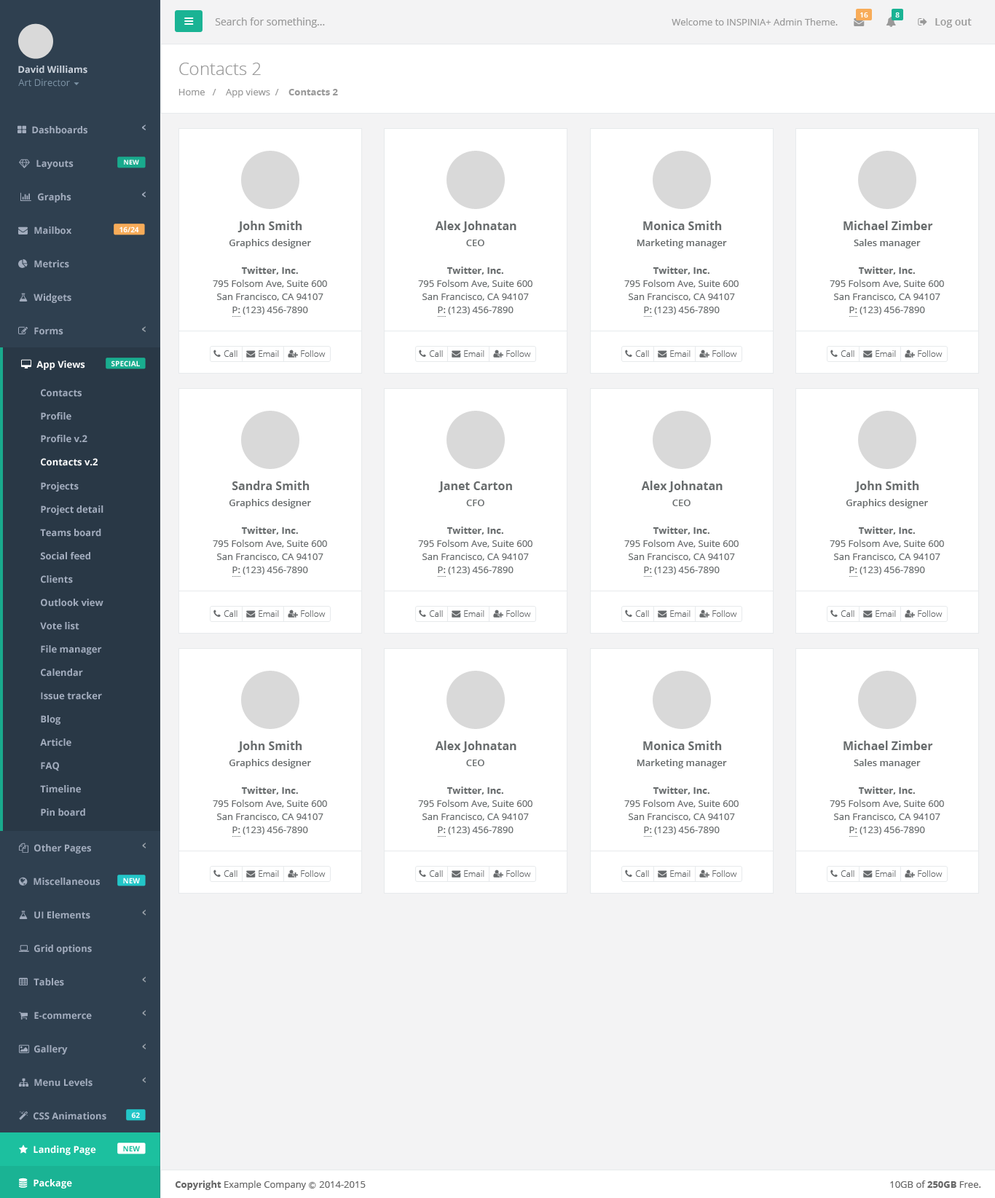
<style>
.page{position:relative;width:995px;height:1198px;background:#ffffff}
.page>*{position:absolute;margin:0}
.t1{font:10.2px "OpenSans";color:#999999}
.t2{font:7.3px "OpenSans-Semibold";color:#ffffff}
.t3{font:9.5px "OpenSans";color:#999999}
.t4{font:10.2px "OpenSans-Semibold";color:#999999}
.t5{font:9.5px "OpenSans-Bold";color:#cad1db}
.t6{font:17.5px "OpenSans-Light";color:#999999}
.t7{font:9.5px "OpenSans";color:#7d93a5}
.t8{font:9.5px "OpenSans-Bold";color:#999999}
.t9{font:9.5px "OpenSans-Bold";color:#a2acbd}
.t10{font:6.6px "OpenSans-Bold";color:#fefefe}
.t11{font:11.7px "OpenSans-Bold";color:#686c6d}
.t12{font:7.3px "OpenSans-Bold";color:#fefefe}
.t13{font:9.5px "OpenSans-Semibold";color:#686c6d}
.t14{font:9.5px/13.1px "OpenSans";color:#686c6d}
.t15{font:9.5px/13.1px "OpenSans-Bold";color:#686c6d}
.t16{font:5.8px "OpenSans";color:#686c6d}
.t17{font:8.7px "OpenSans-Light";color:#676a6c}
.t18{font:9.5px "OpenSans-Bold";color:#ffffff}
.t19{font:7.3px "OpenSans-Bold";color:#1cc09f}
.t20{font:9.5px "OpenSans";color:#666666}
.t21{font:9.5px "OpenSans-Bold";color:#666666}
.t22{font:7.3px "Meiryo";color:#666666}
</style>
<div class="page">
<p class="t1" style="left:215px;top:17px;width:110px;height:11px">Search for something...</p>
<p class="t2" style="left:860px;top:12px;width:8px;height:5px">16</p>
<p class="t2" style="left:895px;top:12px;width:5px;height:5px">8</p>
<p class="t3" style="left:672px;top:18px;width:166px;height:7px">Welcome to INSPINIA+ Admin Theme.</p>
<p class="t4" style="left:935px;top:18px;width:37px;height:10px">Log out</p>
<p class="t5" style="left:18px;top:66px;width:69px;height:8px">David Williams</p>
<p class="t6" style="left:179px;top:63px;width:82px;height:12px">Contacts 2</p>
<p class="t7" style="left:18px;top:79px;width:52px;height:8px">Art Director</p>
<p class="t3" style="left:178px;top:89px;width:160px;height:9px">Home   /    App views  /   <span class="t8"> Contacts 2</span></p>
<p class="t9" style="left:32px;top:126px;width:55px;height:8px">Dashboards</p>
<p class="t9" style="left:36px;top:160px;width:38px;height:9px">Layouts</p>
<p class="t10" style="left:124px;top:160px;width:15px;height:5px">NEW</p>
<p class="t9" style="left:38px;top:193px;width:33px;height:10px">Graphs</p>
<p class="t11" style="left:237px;top:221px;width:65px;height:11px">John Smith</p>
<p class="t11" style="left:435px;top:221px;width:81px;height:11px">Alex Johnatan</p>
<p class="t11" style="left:643px;top:221px;width:79px;height:9px">Monica Smith</p>
<p class="t11" style="left:844px;top:221px;width:89px;height:9px">Michael Zimber</p>
<p class="t9" style="left:34px;top:227px;width:37px;height:8px">Mailbox</p>
<p class="t12" style="left:119px;top:227px;width:20px;height:5px">16/24</p>
<p class="t13" style="left:229px;top:239px;width:82px;height:9px">Graphics designer</p>
<p class="t13" style="left:466px;top:240px;width:18px;height:6px">CEO</p>
<p class="t13" style="left:637px;top:239px;width:90px;height:9px">Marketing manager</p>
<p class="t13" style="left:854px;top:239px;width:67px;height:9px">Sales manager</p>
<p class="t9" style="left:34px;top:260px;width:35px;height:8px">Metrics</p>
<p class="t14" style="left:213px;top:267px;width:114px;height:48px;text-align:center"><span class="t15">Twitter, Inc.<br></span>795 Folsom Ave, Suite 600<br>San Francisco, CA 94107<br>P: (123) 456-7890</p>
<p class="t14" style="left:418px;top:267px;width:115px;height:48px;text-align:center"><span class="t15">Twitter, Inc.<br></span>795 Folsom Ave, Suite 600<br>San Francisco, CA 94107<br>P: (123) 456-7890</p>
<p class="t14" style="left:624px;top:267px;width:115px;height:48px;text-align:center"><span class="t15">Twitter, Inc.<br></span>795 Folsom Ave, Suite 600<br>San Francisco, CA 94107<br>P: (123) 456-7890</p>
<p class="t14" style="left:830px;top:267px;width:114px;height:48px;text-align:center"><span class="t15">Twitter, Inc.<br></span>795 Folsom Ave, Suite 600<br>San Francisco, CA 94107<br>P: (123) 456-7890</p>
<p class="t9" style="left:34px;top:294px;width:37px;height:9px">Widgets</p>
<p class="t16" style="left:232px;top:316px;width:8px;height:1px">......</p>
<p class="t16" style="left:438px;top:316px;width:8px;height:1px">......</p>
<p class="t16" style="left:644px;top:316px;width:8px;height:1px">......</p>
<p class="t16" style="left:849px;top:316px;width:8px;height:1px">......</p>
<p class="t9" style="left:34px;top:327px;width:29px;height:8px">Forms</p>
<p class="t17" style="left:224px;top:350px;width:13px;height:7px">Call</p>
<p class="t17" style="left:259px;top:350px;width:20px;height:7px">Email</p>
<p class="t17" style="left:301px;top:350px;width:25px;height:7px">Follow</p>
<p class="t17" style="left:429px;top:350px;width:14px;height:7px">Call</p>
<p class="t17" style="left:464px;top:350px;width:20px;height:7px">Email</p>
<p class="t17" style="left:506px;top:350px;width:25px;height:7px">Follow</p>
<p class="t17" style="left:635px;top:350px;width:14px;height:7px">Call</p>
<p class="t17" style="left:670px;top:350px;width:21px;height:7px">Email</p>
<p class="t17" style="left:712px;top:350px;width:25px;height:7px">Follow</p>
<p class="t17" style="left:841px;top:350px;width:13px;height:7px">Call</p>
<p class="t17" style="left:876px;top:350px;width:20px;height:7px">Email</p>
<p class="t17" style="left:918px;top:350px;width:25px;height:7px">Follow</p>
<p class="t18" style="left:36px;top:361px;width:49px;height:9px">App Views</p>
<p class="t12" style="left:111px;top:361px;width:29px;height:5px">SPECIAL</p>
<p class="t9" style="left:41px;top:389px;width:41px;height:8px">Contacts</p>
<p class="t9" style="left:41px;top:412px;width:30px;height:8px">Profile</p>
<p class="t9" style="left:41px;top:435px;width:46px;height:8px">Profile v.2</p>
<p class="t18" style="left:41px;top:458px;width:57px;height:8px">Contacts v.2</p>
<p class="t9" style="left:41px;top:482px;width:38px;height:10px">Projects</p>
<p class="t11" style="left:232px;top:481px;width:78px;height:9px">Sandra Smith</p>
<p class="t11" style="left:439px;top:482px;width:73px;height:10px">Janet Carton</p>
<p class="t11" style="left:641px;top:481px;width:82px;height:11px">Alex Johnatan</p>
<p class="t11" style="left:854px;top:481px;width:65px;height:11px">John Smith</p>
<p class="t9" style="left:41px;top:506px;width:62px;height:9px">Project detail</p>
<p class="t13" style="left:229px;top:499px;width:82px;height:9px">Graphics designer</p>
<p class="t13" style="left:466px;top:500px;width:18px;height:6px">CFO</p>
<p class="t13" style="left:672px;top:500px;width:19px;height:6px">CEO</p>
<p class="t13" style="left:846px;top:499px;width:82px;height:9px">Graphics designer</p>
<p class="t9" style="left:40px;top:529px;width:61px;height:8px">Teams board</p>
<p class="t14" style="left:213px;top:527px;width:114px;height:48px;text-align:center"><span class="t15">Twitter, Inc.<br></span>795 Folsom Ave, Suite 600<br>San Francisco, CA 94107<br>P: (123) 456-7890</p>
<p class="t14" style="left:418px;top:527px;width:115px;height:48px;text-align:center"><span class="t15">Twitter, Inc.<br></span>795 Folsom Ave, Suite 600<br>San Francisco, CA 94107<br>P: (123) 456-7890</p>
<p class="t14" style="left:624px;top:527px;width:115px;height:48px;text-align:center"><span class="t15">Twitter, Inc.<br></span>795 Folsom Ave, Suite 600<br>San Francisco, CA 94107<br>P: (123) 456-7890</p>
<p class="t14" style="left:830px;top:527px;width:114px;height:48px;text-align:center"><span class="t15">Twitter, Inc.<br></span>795 Folsom Ave, Suite 600<br>San Francisco, CA 94107<br>P: (123) 456-7890</p>
<p class="t9" style="left:40px;top:552px;width:50px;height:8px">Social feed</p>
<p class="t9" style="left:41px;top:575px;width:32px;height:9px">Clients</p>
<p class="t16" style="left:232px;top:576px;width:8px;height:1px">......</p>
<p class="t16" style="left:438px;top:576px;width:8px;height:1px">......</p>
<p class="t16" style="left:644px;top:576px;width:8px;height:1px">......</p>
<p class="t16" style="left:849px;top:576px;width:8px;height:1px">......</p>
<p class="t9" style="left:41px;top:599px;width:62px;height:8px">Outlook view</p>
<p class="t17" style="left:224px;top:610px;width:13px;height:7px">Call</p>
<p class="t17" style="left:259px;top:610px;width:20px;height:7px">Email</p>
<p class="t17" style="left:301px;top:610px;width:25px;height:7px">Follow</p>
<p class="t17" style="left:429px;top:610px;width:14px;height:7px">Call</p>
<p class="t17" style="left:464px;top:610px;width:20px;height:7px">Email</p>
<p class="t17" style="left:506px;top:610px;width:25px;height:7px">Follow</p>
<p class="t17" style="left:635px;top:610px;width:14px;height:7px">Call</p>
<p class="t17" style="left:670px;top:610px;width:21px;height:7px">Email</p>
<p class="t17" style="left:712px;top:610px;width:25px;height:7px">Follow</p>
<p class="t17" style="left:841px;top:610px;width:13px;height:7px">Call</p>
<p class="t17" style="left:876px;top:610px;width:20px;height:7px">Email</p>
<p class="t17" style="left:918px;top:610px;width:25px;height:7px">Follow</p>
<p class="t9" style="left:40px;top:622px;width:39px;height:8px">Vote list</p>
<p class="t9" style="left:41px;top:645px;width:61px;height:10px">File manager</p>
<p class="t9" style="left:41px;top:669px;width:42px;height:8px">Calendar</p>
<p class="t9" style="left:41px;top:692px;width:61px;height:8px">Issue tracker</p>
<p class="t9" style="left:41px;top:715px;width:19px;height:10px">Blog</p>
<p class="t9" style="left:40px;top:739px;width:31px;height:8px">Article</p>
<p class="t11" style="left:237px;top:741px;width:65px;height:12px">John Smith</p>
<p class="t11" style="left:435px;top:741px;width:81px;height:12px">Alex Johnatan</p>
<p class="t11" style="left:643px;top:741px;width:79px;height:9px">Monica Smith</p>
<p class="t11" style="left:844px;top:741px;width:89px;height:9px">Michael Zimber</p>
<p class="t9" style="left:41px;top:762px;width:18px;height:9px">FAQ</p>
<p class="t13" style="left:229px;top:759px;width:82px;height:10px">Graphics designer</p>
<p class="t13" style="left:466px;top:760px;width:18px;height:6px">CEO</p>
<p class="t13" style="left:637px;top:759px;width:90px;height:10px">Marketing manager</p>
<p class="t13" style="left:854px;top:759px;width:67px;height:10px">Sales manager</p>
<p class="t9" style="left:40px;top:785px;width:41px;height:8px">Timeline</p>
<p class="t14" style="left:213px;top:787px;width:114px;height:48px;text-align:center"><span class="t15">Twitter, Inc.<br></span>795 Folsom Ave, Suite 600<br>San Francisco, CA 94107<br>P: (123) 456-7890</p>
<p class="t14" style="left:418px;top:787px;width:115px;height:48px;text-align:center"><span class="t15">Twitter, Inc.<br></span>795 Folsom Ave, Suite 600<br>San Francisco, CA 94107<br>P: (123) 456-7890</p>
<p class="t14" style="left:624px;top:787px;width:115px;height:48px;text-align:center"><span class="t15">Twitter, Inc.<br></span>795 Folsom Ave, Suite 600<br>San Francisco, CA 94107<br>P: (123) 456-7890</p>
<p class="t14" style="left:830px;top:787px;width:114px;height:48px;text-align:center"><span class="t15">Twitter, Inc.<br></span>795 Folsom Ave, Suite 600<br>San Francisco, CA 94107<br>P: (123) 456-7890</p>
<p class="t9" style="left:41px;top:809px;width:44px;height:8px">Pin board</p>
<p class="t9" style="left:34px;top:844px;width:57px;height:10px">Other Pages</p>
<p class="t16" style="left:232px;top:836px;width:8px;height:1px">......</p>
<p class="t16" style="left:438px;top:836px;width:8px;height:1px">......</p>
<p class="t16" style="left:644px;top:836px;width:8px;height:1px">......</p>
<p class="t16" style="left:849px;top:836px;width:8px;height:1px">......</p>
<p class="t9" style="left:34px;top:878px;width:66px;height:8px">Miscellaneous</p>
<p class="t12" style="left:123px;top:878px;width:17px;height:6px">NEW</p>
<p class="t17" style="left:224px;top:871px;width:13px;height:6px">Call</p>
<p class="t17" style="left:259px;top:871px;width:20px;height:6px">Email</p>
<p class="t17" style="left:301px;top:871px;width:25px;height:6px">Follow</p>
<p class="t17" style="left:429px;top:871px;width:14px;height:6px">Call</p>
<p class="t17" style="left:464px;top:871px;width:20px;height:6px">Email</p>
<p class="t17" style="left:506px;top:871px;width:25px;height:6px">Follow</p>
<p class="t17" style="left:635px;top:871px;width:14px;height:6px">Call</p>
<p class="t17" style="left:670px;top:871px;width:21px;height:6px">Email</p>
<p class="t17" style="left:712px;top:871px;width:25px;height:6px">Follow</p>
<p class="t17" style="left:841px;top:871px;width:13px;height:6px">Call</p>
<p class="t17" style="left:876px;top:871px;width:20px;height:6px">Email</p>
<p class="t17" style="left:918px;top:871px;width:25px;height:6px">Follow</p>
<p class="t9" style="left:34px;top:911px;width:56px;height:8px">UI Elements</p>
<p class="t9" style="left:34px;top:945px;width:58px;height:9px">Grid options</p>
<p class="t9" style="left:34px;top:978px;width:30px;height:8px">Tables</p>
<p class="t9" style="left:34px;top:1012px;width:58px;height:8px">E-commerce</p>
<p class="t9" style="left:34px;top:1045px;width:34px;height:10px">Gallery</p>
<p class="t9" style="left:34px;top:1079px;width:59px;height:8px">Menu Levels</p>
<p class="t9" style="left:34px;top:1112px;width:72px;height:8px">CSS Animations</p>
<p class="t12" style="left:131px;top:1112px;width:9px;height:6px">62</p>
<p class="t18" style="left:34px;top:1146px;width:62px;height:9px">Landing Page</p>
<p class="t19" style="left:123px;top:1146px;width:17px;height:6px">NEW</p>
<p class="t18" style="left:34px;top:1179px;width:38px;height:10px">Package</p>
<p class="t20" style="left:175px;top:1181px;width:191px;height:9px"><span class="t21">Copyright</span> Example Company <span class="t22">Ⓒ </span>2014-2015</p>
<p class="t20" style="left:890px;top:1181px;width:91px;height:7px">10GB of <span class="t21">250GB</span> Free.</p>
</div>
